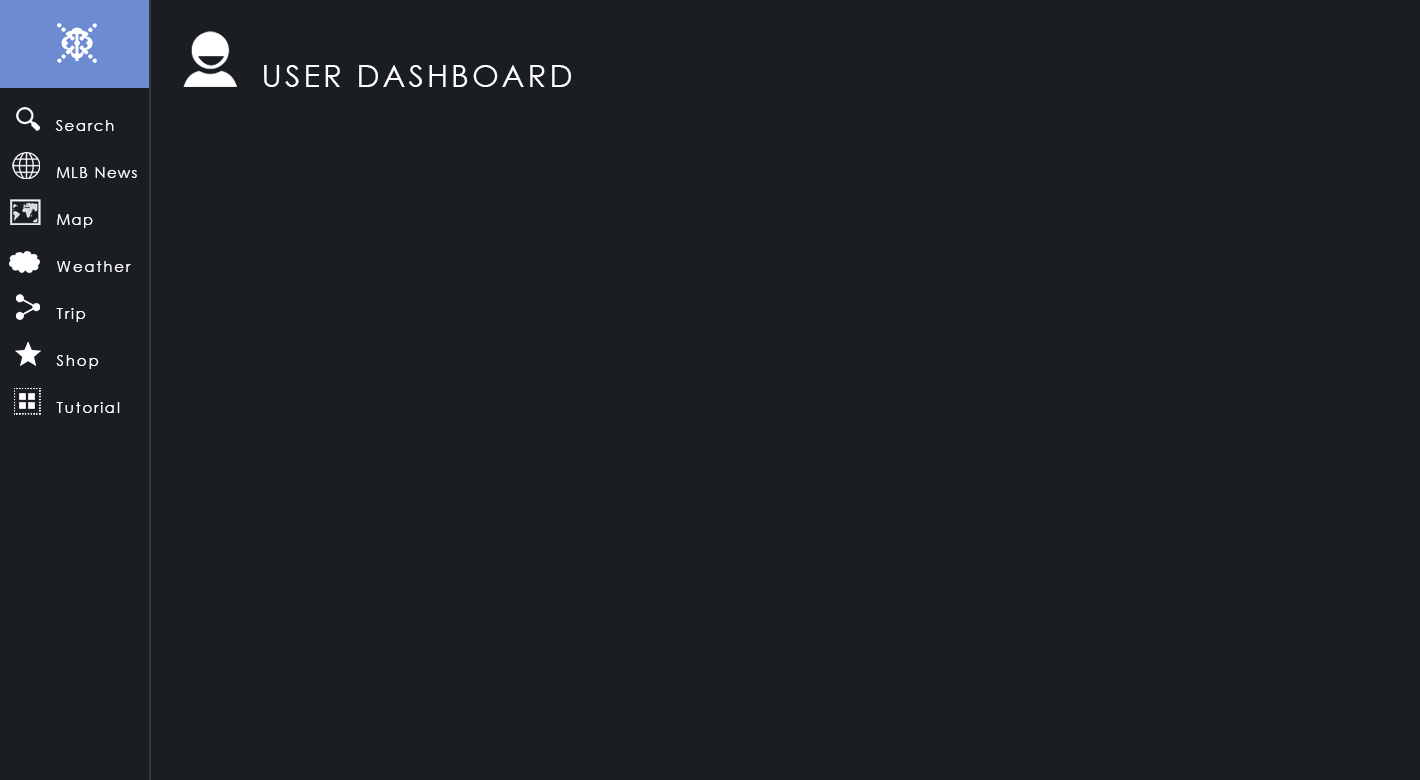
<style>
.page{position:relative;width:1420px;height:780px;background:#1a1e23}
.page>*{position:absolute;margin:0}
.t1{font:10px "CenturyGothic";letter-spacing:0.1em;color:#ffffff}
.t2{font:30.7px "CenturyGothic";letter-spacing:0.1em;color:#ffffff}
.t3{font:15px "CenturyGothic";letter-spacing:0.1em;color:#ffffff}
.t4{font:14.6px "CenturyGothic";letter-spacing:0.1em;color:#ffffff}
.t5{font:15.5px "CenturyGothic";letter-spacing:0.1em;color:#ffffff}
</style>
<div class="page">
<p class="t1" style="left:68px;top:31px;width:18px;height:30px">T</p>
<p class="t2" style="left:264px;top:65px;width:307px;height:22px">USER DASHBOARD</p>
<p class="t3" style="left:55px;top:120px;width:59px;height:11px">Search</p>
<p class="t4" style="left:57px;top:167px;width:80px;height:11px">MLB News</p>
<p class="t4" style="left:57px;top:214px;width:36px;height:14px">Map</p>
<p class="t5" style="left:57px;top:261px;width:74px;height:11px">Weather</p>
<p class="t5" style="left:56px;top:308px;width:30px;height:14px">Trip</p>
<p class="t5" style="left:56px;top:355px;width:43px;height:14px">Shop</p>
<p class="t5" style="left:56px;top:402px;width:64px;height:11px">Tutorial</p>
</div>
